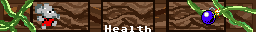
<style>
.page{position:relative;width:256px;height:32px}
.page>*{position:absolute;margin:0}
.t1{font:8px "C64ProMono";color:#ffffff}
</style>
<div class="page">
<p class="t1" style="left:105px;top:25px;width:46px;height:7px">Health</p>
</div>
